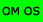
<style>
.page{position:relative;width:43px;height:22px;background:#00ff00}
.page>*{position:absolute;margin:0}
.t1{font:11px "Verdana";color:#000000}
</style>
<div class="page">
<p class="t1" style="left:2px;top:6px;width:38px;height:10px">OM OS</p>
</div>
